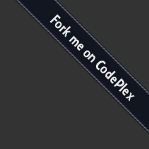
<style>
.page{position:relative;width:149px;height:149px;background:#333333}
.page>*{position:absolute;margin:0}
.t1{font:16px "Collegiate";color:#ffffff}
</style>
<div class="page">
<p class="t1" style="left:49px;top:14px;width:86px;height:88px;rotate:45deg">Fork me on CodePlex</p>
</div>
